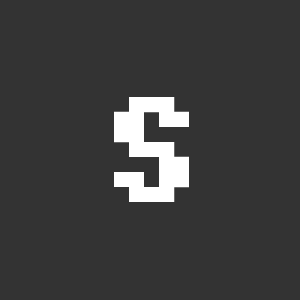
<style>
.page{position:relative;width:300px;height:300px;background:#333333}
.page>*{position:absolute;margin:0}
.t1{font:150px "Hardpixel";color:#ffffff}
</style>
<div class="page">
<p class="t1" style="left:114px;top:97px;width:75px;height:105px">S</p>
</div>
